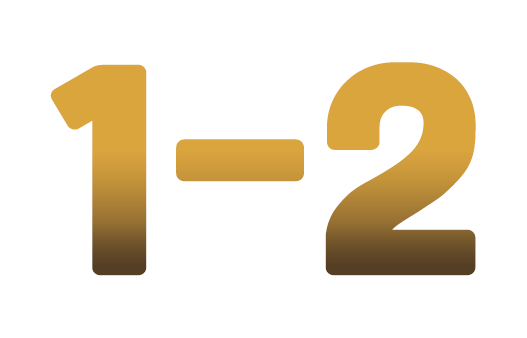
<style>
.page{position:relative;width:527px;height:338px;background:#ffffff}
.page>*{position:absolute;margin:0}
.t1{font:252.2px "TTTogether"}
</style>
<div class="page">
<p class="t1" style="left:50px;top:62px;width:426px;height:214px">1-2</p>
</div>
